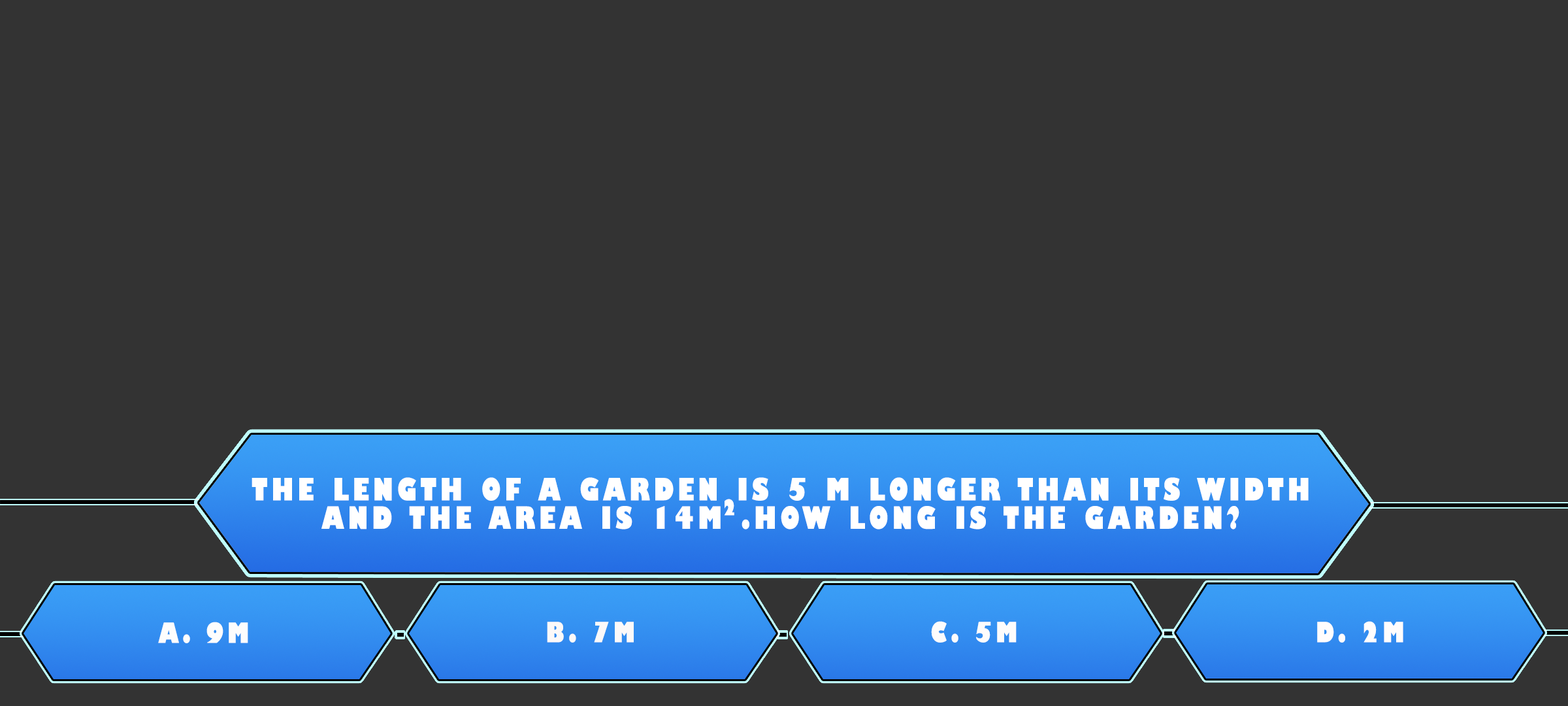
<style>
.page{position:relative;width:1568px;height:706px;background:#333333}
.page>*{position:absolute;margin:0}
.t1{font:30px/28.4px "GillSans-UltraBoldCondensed";letter-spacing:0.115em;color:#ffffff;text-transform:uppercase;scale:1.12 1}
.t2{font:21.1px "GillSans-UltraBoldCondensed";letter-spacing:0.115em;color:#ffffff;text-transform:uppercase;scale:1.11 1}
.t3{font:27.2px "GillSans-UltraBoldCondensed";letter-spacing:0.115em;color:#fdfdfd;text-transform:uppercase;scale:1.12 1}
.t4{font:27.2px "GillSans-UltraBoldCondensed";letter-spacing:0.115em;color:#fcf9f9;text-transform:uppercase;scale:1.12 1}
.t5{font:27.2px "GillSans-UltraBoldCondensed";letter-spacing:0.115em;color:#fdfcfc;text-transform:uppercase;scale:1.12 1}
.t6{font:27.2px "GillSans-UltraBoldCondensed";letter-spacing:0.115em;color:#fffdfd;text-transform:uppercase;scale:1.12 1}
</style>
<div class="page">
<p class="t1" style="left:252px;top:477px;width:1057px;height:52px;text-align:center">The length of a garden is 5 m longer than its width<br>and the area is 14m .How long is the garden?</p>
<p class="t2" style="left:724px;top:498px;width:10px;height:17px">2</p>
<p class="t3" style="left:158px;top:621px;width:90px;height:22px">A. 9m</p>
<p class="t4" style="left:547px;top:621px;width:87px;height:21px">B. 7m</p>
<p class="t5" style="left:931px;top:621px;width:86px;height:21px">C. 5m</p>
<p class="t6" style="left:1317px;top:621px;width:86px;height:21px">D. 2m</p>
</div>
